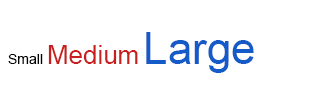
<style>
.page{position:relative;width:320px;height:96px;background:#ffffff}
.page>*{position:absolute;margin:0}
.t1{font:26px "ArialMT";color:#c81e1e}
.t2{font:14px "ArialMT";color:#000000}
.t3{font:44px "ArialMT";color:#145ac8}
</style>
<div class="page">
<p class="t1" style="left:8px;top:32px;width:246px;height:41px"><span class="t2">Small </span>Medium <span class="t3">Large</span></p>
</div>
